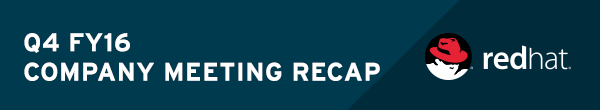
<style>
.page{position:relative;width:600px;height:110px;background:#003a4f}
.page>*{position:absolute;margin:0}
.t1{font:25.2px/29.4px "Interstate-Bold";letter-spacing:0.03em;color:#ffffff;text-transform:uppercase}
</style>
<div class="page">
<p class="t1" style="left:24px;top:33px;width:356px;height:48px">Q4 FY16<br>COMPANY MEETING RECAP</p>
</div>
